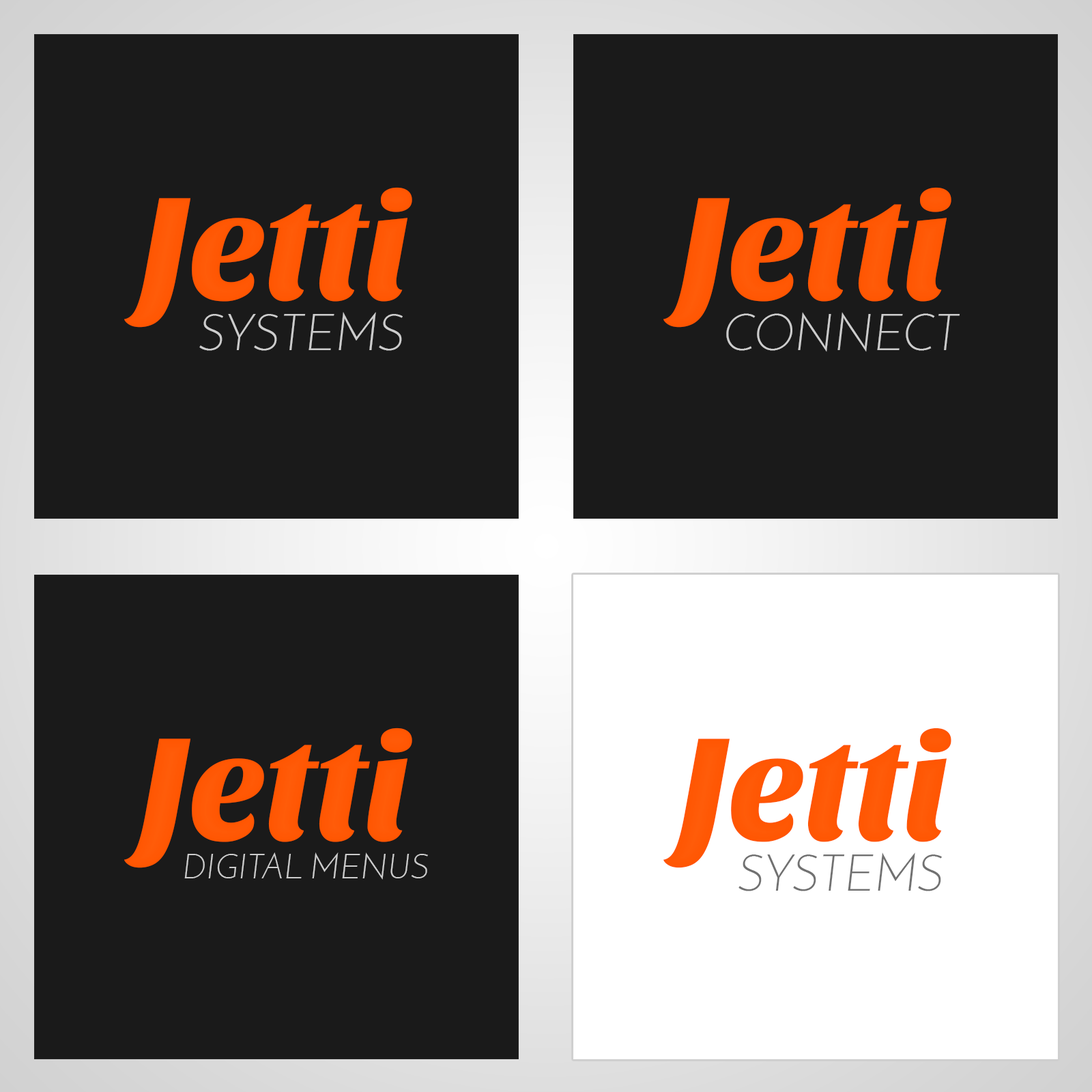
<style>
.page{position:relative;width:1092px;height:1092px;background:#1a1a1a}
.page>*{position:absolute;margin:0}
.t1{font:151.6px "SansitaOne";letter-spacing:-0.01em;color:#ff5400;scale:0.95 1}
.t2{font:51.2px "JosefinSans-LightItalic";letter-spacing:0.01em;color:#cccccc;text-transform:uppercase;scale:0.94 1}
.t3{font:35.2px "JosefinSans-LightItalic";letter-spacing:0.01em;color:#cccccc;text-transform:uppercase;scale:0.94 1}
.t4{font:51.2px "JosefinSans-LightItalic";letter-spacing:0.01em;color:#717171;text-transform:uppercase;scale:0.94 1}
</style>
<div class="page">
<p class="t1" style="left:124px;top:187px;width:288px;height:141px">Jetti</p>
<p class="t1" style="left:663px;top:187px;width:288px;height:141px">Jetti</p>
<p class="t2" style="left:199px;top:312px;width:204px;height:39px">systems</p>
<p class="t2" style="left:726px;top:312px;width:234px;height:40px">CONNECT</p>
<p class="t1" style="left:124px;top:728px;width:288px;height:140px">Jetti</p>
<p class="t1" style="left:663px;top:728px;width:288px;height:140px">Jetti</p>
<p class="t3" style="left:184px;top:852px;width:244px;height:28px">DIGITAL MENUS</p>
<p class="t4" style="left:738px;top:852px;width:204px;height:39px">systems</p>
</div>
